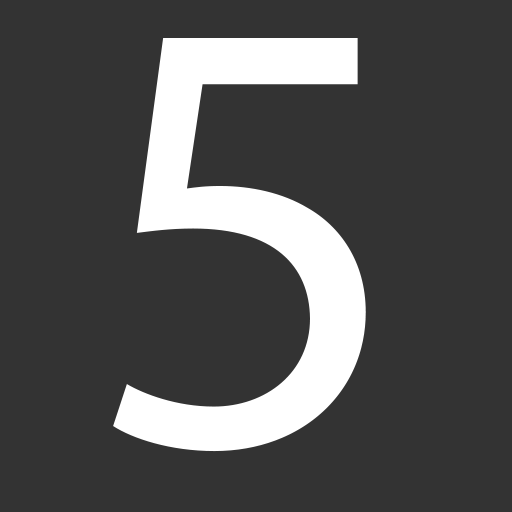
<style>
.page{position:relative;width:512px;height:512px;background:#333333}
.page>*{position:absolute;margin:0}
.t1{font:625px "MyriadPro-Regular";color:#ffffff}
</style>
<div class="page">
<p class="t1" style="left:113px;top:38px;width:253px;height:414px">5</p>
</div>
